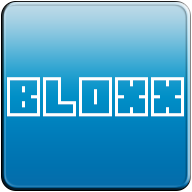
<style>
.page{position:relative;width:192px;height:192px}
.page>*{position:absolute;margin:0}
.t1{font:48px "Blocked";color:#ffffff}
</style>
<div class="page">
<p class="t1" style="left:7px;top:77px;width:177px;height:40px">BLOXX</p>
</div>
